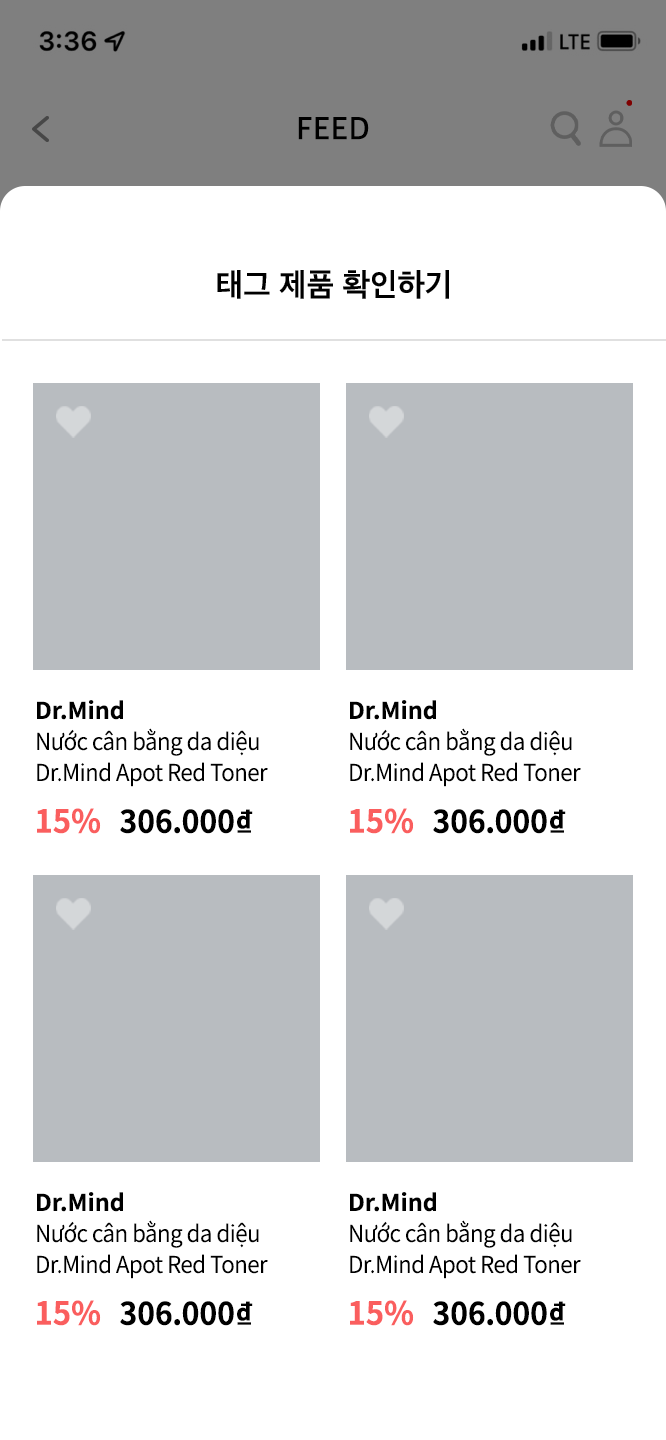
<style>
.page{position:relative;width:666px;height:1440px;background:#ffffff}
.page>*{position:absolute;margin:0}
.t1{font:32px "AppleSDGothicNeo-SemiBold";letter-spacing:0.017em;color:#000000;scale:0.97 1}
.t2{font:23px/31px "NotoSansCJKkr-DemiLight";letter-spacing:-0.02em;color:#000000;scale:0.97 1}
.t3{font:23px/31px "NotoSansCJKkr-Bold";color:#000000}
.t4{font:32px "NotoSansCJKkr-Bold";letter-spacing:0.001em;color:#fa5e5e}
.t5{font:31px "NotoSansCJKkr-Bold";letter-spacing:0.001em;color:#000000}
.t6{font:31px "NotoSansCJKkr-Bold";letter-spacing:-0.013em;color:#000000}
</style>
<div class="page">
<p class="t1" style="left:298px;top:117px;width:71px;height:23px">FEED</p>
<p class="t1" style="left:217px;top:270px;width:232px;height:29px">태그 제품 확인하기</p>
<p class="t2" style="left:37px;top:700px;width:231px;height:87px"><span class="t3">Dr.Mind<br></span>Nước cân bằng da diệu <br>Dr.Mind Apot Red Toner</p>
<p class="t2" style="left:350px;top:700px;width:231px;height:87px"><span class="t3">Dr.Mind<br></span>Nước cân bằng da diệu <br>Dr.Mind Apot Red Toner</p>
<p class="t4" style="left:37px;top:808px;width:64px;height:26px">15%</p>
<p class="t5" style="left:120px;top:809px;width:133px;height:25px">30<span class="t6">6.</span>000₫</p>
<p class="t4" style="left:350px;top:808px;width:64px;height:26px">15%</p>
<p class="t5" style="left:433px;top:809px;width:133px;height:25px">30<span class="t6">6.</span>000₫</p>
<p class="t2" style="left:37px;top:1192px;width:231px;height:87px"><span class="t3">Dr.Mind<br></span>Nước cân bằng da diệu <br>Dr.Mind Apot Red Toner</p>
<p class="t2" style="left:350px;top:1192px;width:231px;height:87px"><span class="t3">Dr.Mind<br></span>Nước cân bằng da diệu <br>Dr.Mind Apot Red Toner</p>
<p class="t4" style="left:37px;top:1300px;width:64px;height:26px">15%</p>
<p class="t5" style="left:120px;top:1301px;width:133px;height:25px">30<span class="t6">6.</span>000₫</p>
<p class="t4" style="left:350px;top:1300px;width:64px;height:26px">15%</p>
<p class="t5" style="left:433px;top:1301px;width:133px;height:25px">30<span class="t6">6.</span>000₫</p>
</div>
